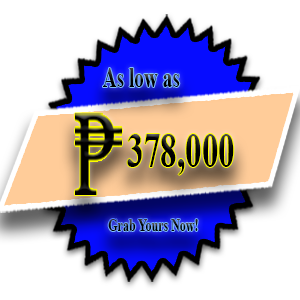
<style>
.page{position:relative;width:300px;height:300px;background:#ffffff}
.page>*{position:absolute;margin:0}
.t1{font:29.2px "TimesNewRomanPS-BoldMT";scale:0.66 1}
.t2{font:50.1px "TimesNewRomanPS-BoldMT";color:#000000;scale:0.66 1}
.t3{font:18.2px "TimesNewRomanPS-BoldMT";scale:0.66 1}
</style>
<div class="page">
<p class="t1" style="left:103px;top:68px;width:77px;height:19px">As low as</p>
<p class="t2" style="left:127px;top:134px;width:107px;height:41px">378,000</p>
<p class="t3" style="left:108px;top:219px;width:90px;height:12px">Grab Yours Now!</p>
</div>
